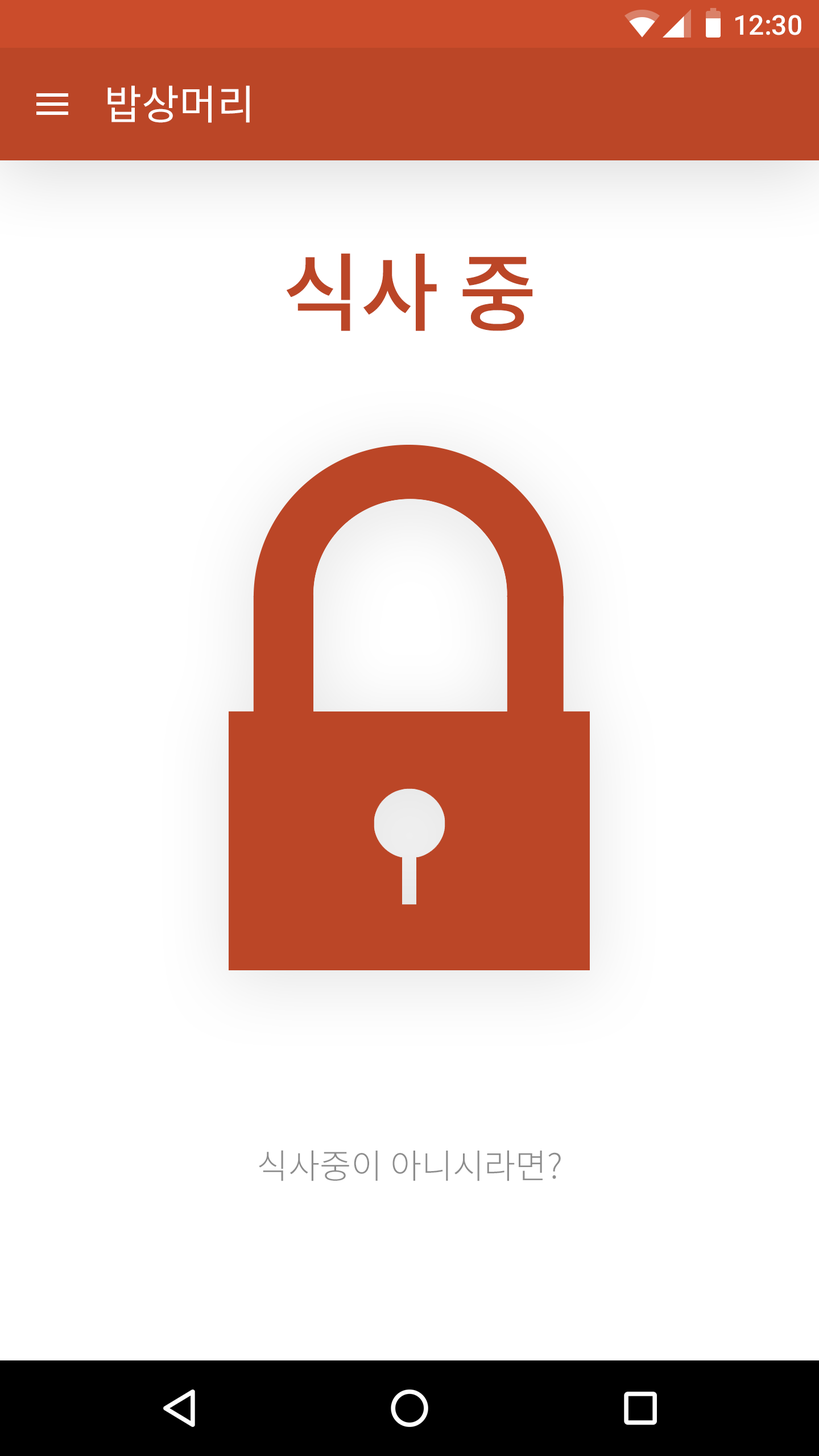
<style>
.page{position:relative;width:819px;height:1456px;background:#ffffff}
.page>*{position:absolute;margin:0}
.t1{font:27.3px "Roboto-Medium";color:#ffffff}
.t2{font:40.9px "NotoSansCJKkr-Regular";color:#ffffff}
.t3{font:85.3px "NotoSansCJKkr-Medium";color:#bb4627}
.t4{font:34.1px "NotoSansCJKkr-Light";color:#8d8d8d}
</style>
<div class="page">
<p class="t1" style="left:735px;top:15px;width:66px;height:20px">12:30</p>
<p class="t2" style="left:107px;top:85px;width:143px;height:38px">밥상머리</p>
<p class="t3" style="left:286px;top:253px;width:247px;height:78px">식사 중</p>
<p class="t4" style="left:259px;top:1150px;width:302px;height:31px">식사중이 아니시라면?</p>
</div>
